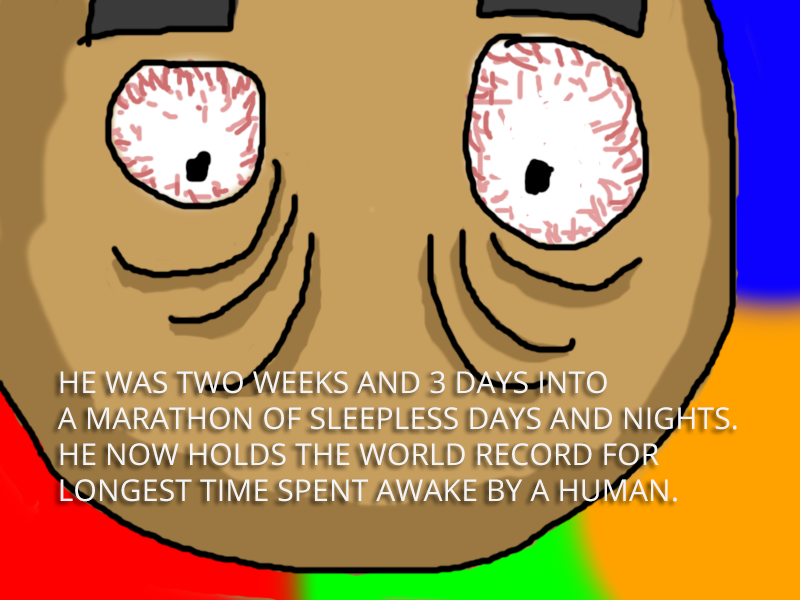
<style>
.page{position:relative;width:800px;height:600px;background:#c69e5e}
.page>*{position:absolute;margin:0}
.t1{font:30px "OpenSans";letter-spacing:0.005em;color:#f3f3f3}
</style>
<div class="page">
<p class="t1" style="left:57px;top:371px;width:680px;height:131px">HE WAS TWO WEEKS AND 3 DAYS INTO<br>A MARATHON OF SLEEPLESS DAYS AND NIGHTS.<br>HE NOW HOLDS THE WORLD RECORD FOR<br>LONGEST TIME SPENT AWAKE BY A HUMAN.</p>
</div>
